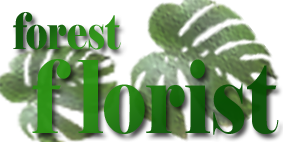
<style>
.page{position:relative;width:283px;height:142px;background:#ffffff}
.page>*{position:absolute;margin:0}
.t1{font:50px "Elephant-Regular";scale:0.75 1}
.t2{font:100px "Elephant-Regular";scale:0.75 1}
</style>
<div class="page">
<p class="t1" style="left:13px;top:12px;width:108px;height:38px">forest</p>
<p class="t2" style="left:32px;top:59px;width:247px;height:76px">f lorist</p>
</div>
